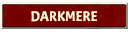
<style>
.page{position:relative;width:128px;height:33px}
.page>*{position:absolute;margin:0}
.t1{font:14px "Acme-Regular";color:#fff6cd}
</style>
<div class="page">
<p class="t1" style="left:31px;top:11px;width:66px;height:11px">DARKMERE</p>
</div>
